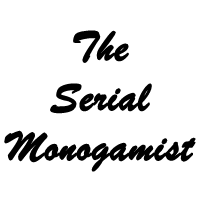
<style>
.page{position:relative;width:200px;height:200px;background:#ffffff}
.page>*{position:absolute;margin:0}
.t1{font:44px/50px "BrushScriptMT";color:#000000;font-weight:bold}
</style>
<div class="page">
<p class="t1" style="left:4px;top:30px;width:192px;height:142px;text-align:center">The<br>Serial<br>Monogamist</p>
</div>
